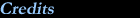
<style>
.page{position:relative;width:140px;height:18px;background:#000000}
.page>*{position:absolute;margin:0}
.t1{font:18px "Garamond-Bold";color:#99ccff;font-style:italic}
</style>
<div class="page">
<p class="t1" style="left:0px;top:2px;width:54px;height:13px">Credits</p>
</div>
